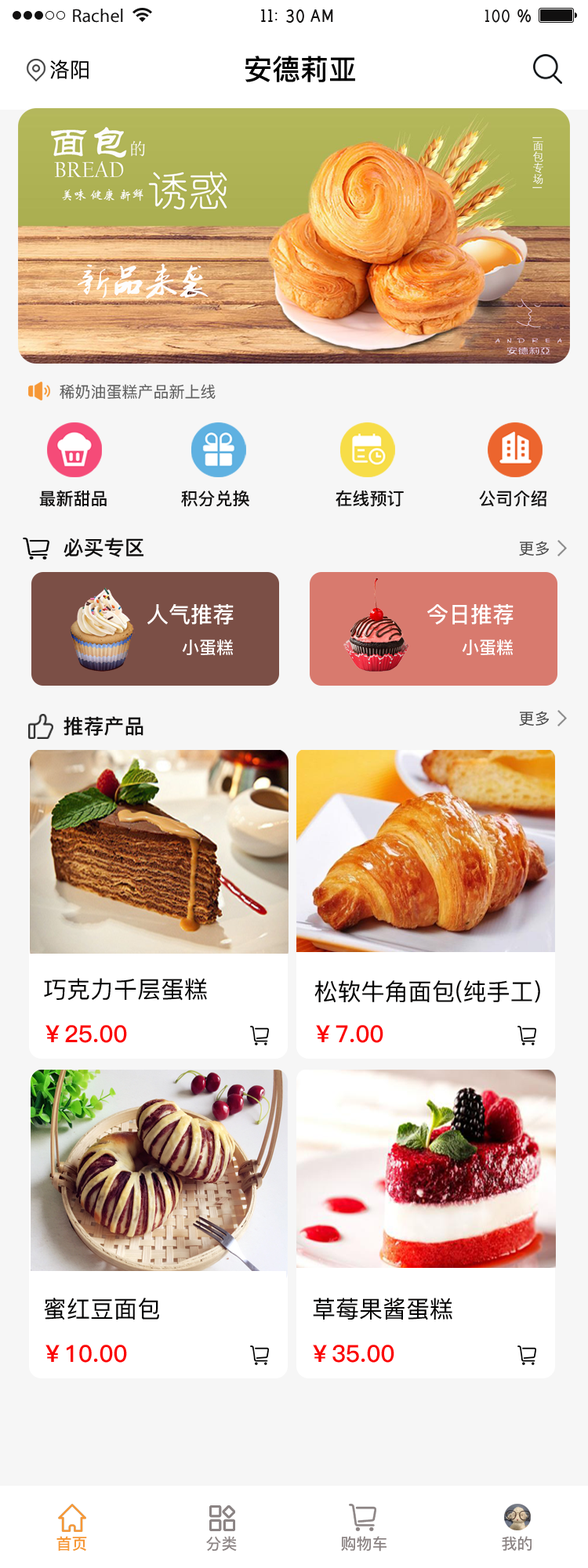
<style>
.page{position:relative;width:588px;height:1568px;background:#f6f6f6}
.page>*{position:absolute;margin:0}
.t1{font:20.4px "PingFang-SC-Medium";color:#000000}
.t2{font:28.2px "PingFang-SC-Bold";color:#000000}
.t3{font:15.7px "PingFang-SC-Medium";color:#5c5c5c}
.t4{font:17.2px "PingFang-SC-Bold";color:#111010}
.t5{font:20.4px "PingFang-SC-Bold";color:#111010}
.t6{font:15.7px "PingFang-SC-Medium";color:#454545}
.t7{font:21.9px "PingFang-SC-Bold";color:#ffffff}
.t8{font:17.2px "PingFang-SC-Bold";color:#ffffff}
.t9{font:23.5px "PingFang-SC-Medium";color:#030202}
.t10{font:23.5px "PingFang-SC-Bold";color:#fb0606}
.t11{font:15.7px "PingFang-SC-Bold";color:#f69736}
.t12{font:15.7px "PingFang-SC-Bold";color:#8c8484}
</style>
<div class="page">
<p class="t1" style="left:50px;top:60px;width:39px;height:19px">洛阳</p>
<p class="t2" style="left:245px;top:56px;width:110px;height:26px">安德莉亚</p>
<p class="t3" style="left:60px;top:384px;width:155px;height:16px">稀奶油蛋糕产品新上线</p>
<p class="t4" style="left:39px;top:490px;width:68px;height:17px">最新甜品</p>
<p class="t4" style="left:181px;top:490px;width:68px;height:17px">积分兑换</p>
<p class="t4" style="left:335px;top:490px;width:69px;height:17px">在线预订</p>
<p class="t4" style="left:479px;top:491px;width:67px;height:16px">公司介绍</p>
<p class="t5" style="left:63px;top:538px;width:80px;height:19px">必买专区</p>
<p class="t6" style="left:519px;top:541px;width:30px;height:15px">更多</p>
<p class="t7" style="left:147px;top:603px;width:87px;height:22px">人气推荐</p>
<p class="t7" style="left:427px;top:604px;width:86px;height:21px">今日推荐</p>
<p class="t8" style="left:182px;top:639px;width:51px;height:17px">小蛋糕</p>
<p class="t8" style="left:462px;top:639px;width:50px;height:17px">小蛋糕</p>
<p class="t6" style="left:519px;top:711px;width:30px;height:15px">更多</p>
<p class="t5" style="left:63px;top:716px;width:80px;height:20px">推荐产品</p>
<p class="t9" style="left:44px;top:978px;width:163px;height:23px">巧克力千层蛋糕</p>
<p class="t9" style="left:314px;top:980px;width:226px;height:23px">松软牛角面包(纯手工)</p>
<p class="t10" style="left:45px;top:1025px;width:82px;height:18px">￥25.00</p>
<p class="t10" style="left:316px;top:1025px;width:67px;height:18px">￥7.00</p>
<p class="t9" style="left:44px;top:1298px;width:115px;height:22px">蜜红豆面包</p>
<p class="t9" style="left:313px;top:1298px;width:139px;height:22px">草莓果酱蛋糕</p>
<p class="t10" style="left:45px;top:1345px;width:82px;height:18px">￥10.00</p>
<p class="t10" style="left:313px;top:1345px;width:81px;height:18px">￥35.00</p>
<p class="t11" style="left:56px;top:1536px;width:31px;height:15px">首页</p>
<p class="t12" style="left:206px;top:1536px;width:31px;height:15px">分类</p>
<p class="t12" style="left:341px;top:1536px;width:45px;height:16px">购物车</p>
<p class="t12" style="left:502px;top:1536px;width:29px;height:15px">我的</p>
</div>
